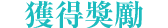
<style>
.page{position:relative;width:168px;height:28px;background:#ffffff}
.page>*{position:absolute;margin:0}
.t1{font:30px "RyuminPr6N-ExBold";color:#1dbcbf}
</style>
<div class="page">
<p class="t1" style="left:24px;top:0px;width:119px;height:29px">獲得獎勵</p>
</div>
